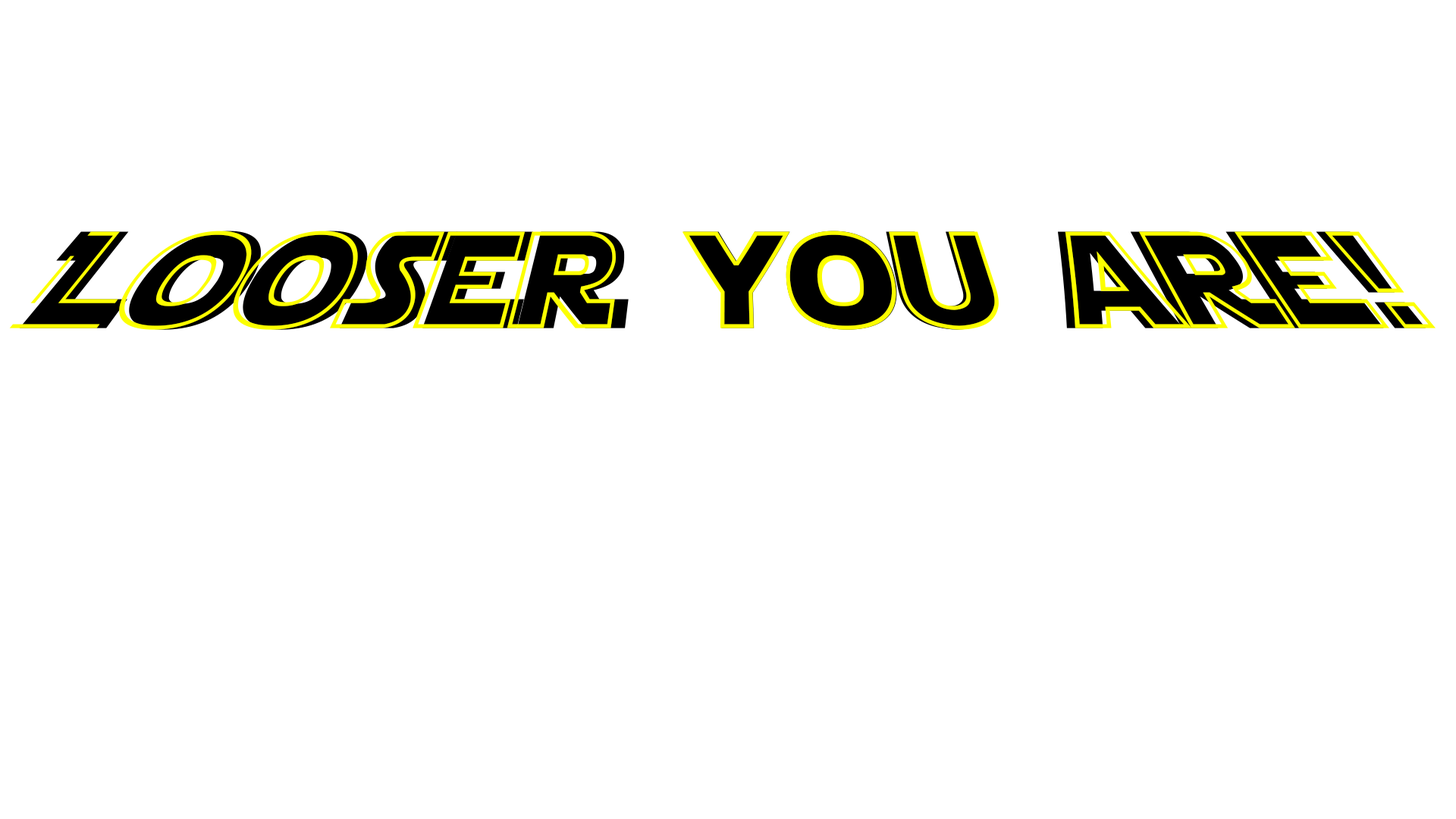
<style>
.page{position:relative;width:1456px;height:819px;background:#ffffff}
.page>*{position:absolute;margin:0}
.t1{font:136.5px "StarJediHollow";color:#fcff00}
.t2{font:136.5px "StarJedi";color:#000000}
</style>
<div class="page">
<p class="t1" style="left:9px;top:231px;width:1427px;height:99px">Looser you are!</p>
<p class="t2" style="left:19px;top:231px;width:1407px;height:99px">Looser you are!</p>
</div>
